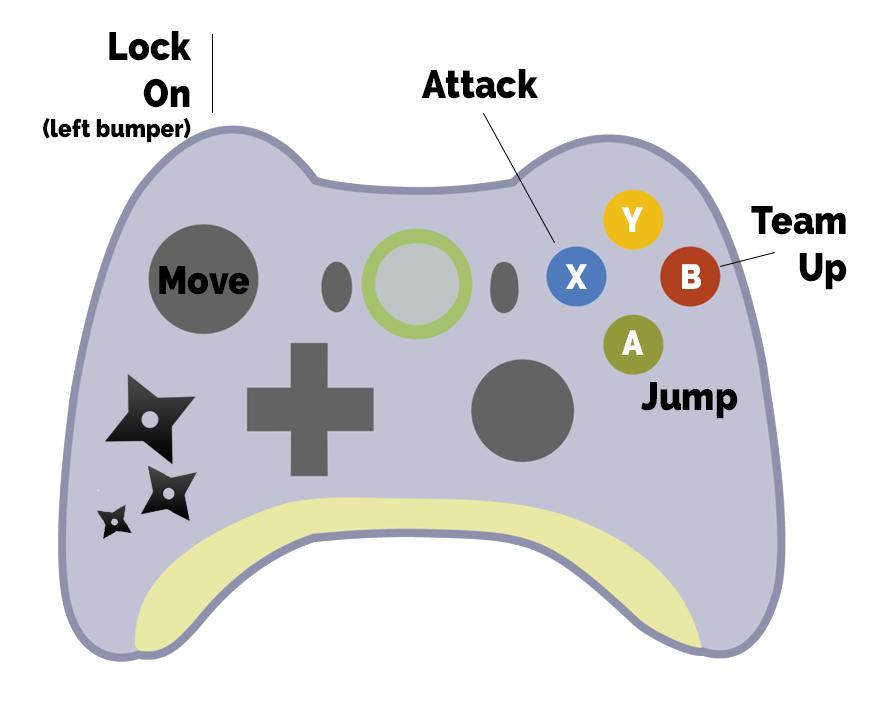
<style>
.page{position:relative;width:893px;height:720px;background:#ffffff}
.page>*{position:absolute;margin:0}
.t1{font:25px "Raleway-Heavy";color:#000000;scale:0.9 1}
.t2{font:39.5px "Raleway-Heavy";color:#000000;scale:0.9 1}
.t3{font:34.9px "Raleway-Heavy";color:#ffffff;scale:0.9 1}
</style>
<div class="page">
<p class="t1" style="left:43px;top:31px;width:149px;height:112px;text-align:right"><span class="t2">Lock<br>On</span><br>(left bumper)</p>
<p class="t2" style="left:421px;top:69px;width:118px;height:30px">Attack</p>
<p class="t3" style="left:621px;top:207px;width:22px;height:25px">Y</p>
<p class="t2" style="left:751px;top:206px;width:96px;height:84px;text-align:right">Team<br>Up</p>
<p class="t2" style="left:159px;top:266px;width:90px;height:29px">Move</p>
<p class="t3" style="left:565px;top:264px;width:22px;height:25px">X</p>
<p class="t3" style="left:682px;top:264px;width:19px;height:25px">B</p>
<p class="t3" style="left:621px;top:330px;width:23px;height:25px">A</p>
<p class="t2" style="left:641px;top:382px;width:97px;height:37px">Jump</p>
</div>
